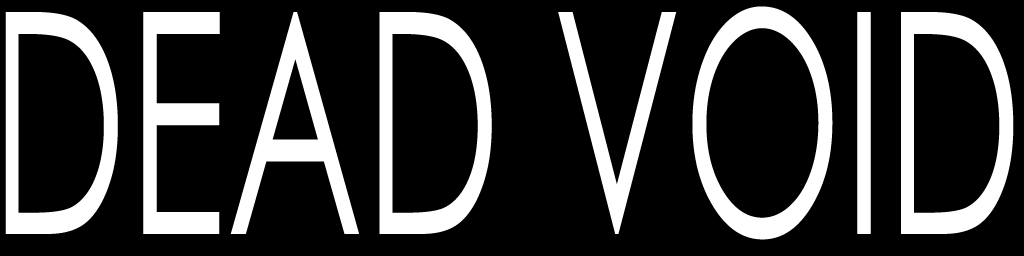
<style>
.page{position:relative;width:1024px;height:256px;background:#000000}
.page>*{position:absolute;margin:0}
.t1{font:308.8px "CenturyGothic";color:#ffffff;scale:0.6 1}
</style>
<div class="page">
<p class="t1" style="left:5px;top:6px;width:1009px;height:234px">DEAD VOID</p>
</div>
